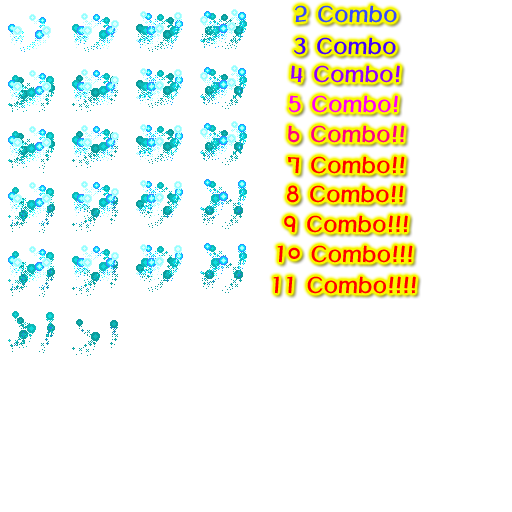
<style>
.page{position:relative;width:512px;height:512px;background:#ffffff}
.page>*{position:absolute;margin:0}
.t1{font:24px "MagicR-HM";color:#3649ff}
.t2{font:24px "MagicR-HM";color:#4200ff}
.t3{font:24px "MagicR-HM";color:#9000ff}
.t4{font:24px "MagicR-HM";color:#ff00f6}
.t5{font:24px "MagicR-HM";color:#ff0084}
.t6{font:24px "MagicR-HM";color:#ff0000}
</style>
<div class="page">
<p class="t1" style="left:295px;top:5px;width:102px;height:18px">2 Combo</p>
<p class="t2" style="left:294px;top:37px;width:102px;height:18px">3 Combo</p>
<p class="t3" style="left:291px;top:65px;width:109px;height:18px">4 Combo!</p>
<p class="t4" style="left:288px;top:95px;width:110px;height:18px">5 Combo!</p>
<p class="t5" style="left:288px;top:125px;width:117px;height:18px">6 Combo!!</p>
<p class="t6" style="left:288px;top:156px;width:117px;height:18px">7 Combo!!</p>
<p class="t6" style="left:287px;top:185px;width:117px;height:18px">8 Combo!!</p>
<p class="t6" style="left:284px;top:215px;width:124px;height:18px">9 Combo!!!</p>
<p class="t6" style="left:277px;top:245px;width:136px;height:18px">10 Combo!!!</p>
<p class="t6" style="left:273px;top:276px;width:143px;height:18px">11 Combo!!!!</p>
</div>
